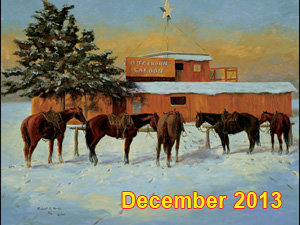
<style>
.page{position:relative;width:300px;height:225px}
.page>*{position:absolute;margin:0}
.t1{font:22.2px "Arial-BoldMT";letter-spacing:0.04em;color:#f6eb13;scale:0.93 1}
</style>
<div class="page">
<p class="t1" style="left:122px;top:192px;width:160px;height:16px">December 2013</p>
</div>
